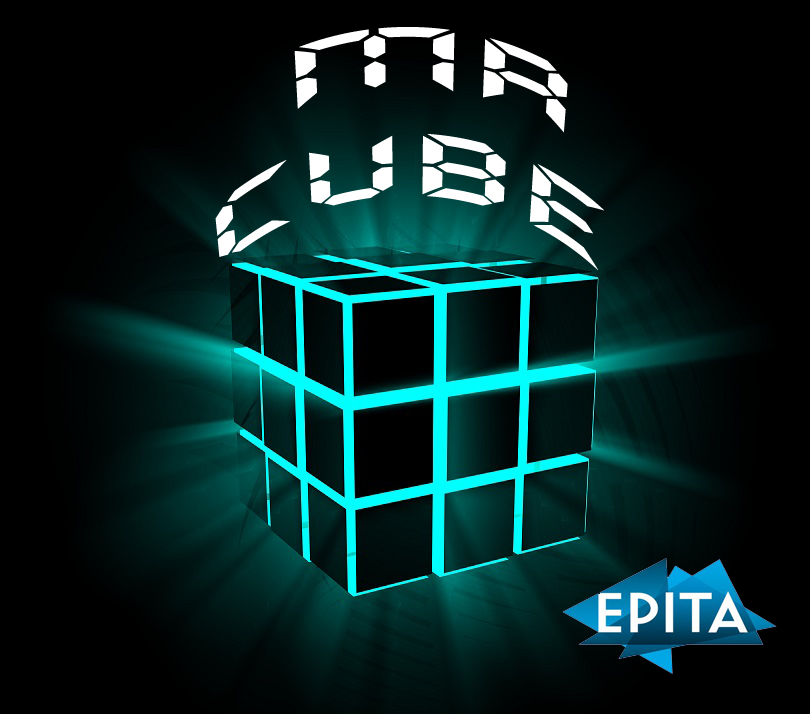
<style>
.page{position:relative;width:810px;height:714px;background:#000000}
.page>*{position:absolute;margin:0}
.t1{font:120px "QuartzMS";color:#ffffff}
</style>
<div class="page">
<p class="t1" style="left:215px;top:27px;width:389px;height:243px">MR<br>CUBE</p>
</div>
